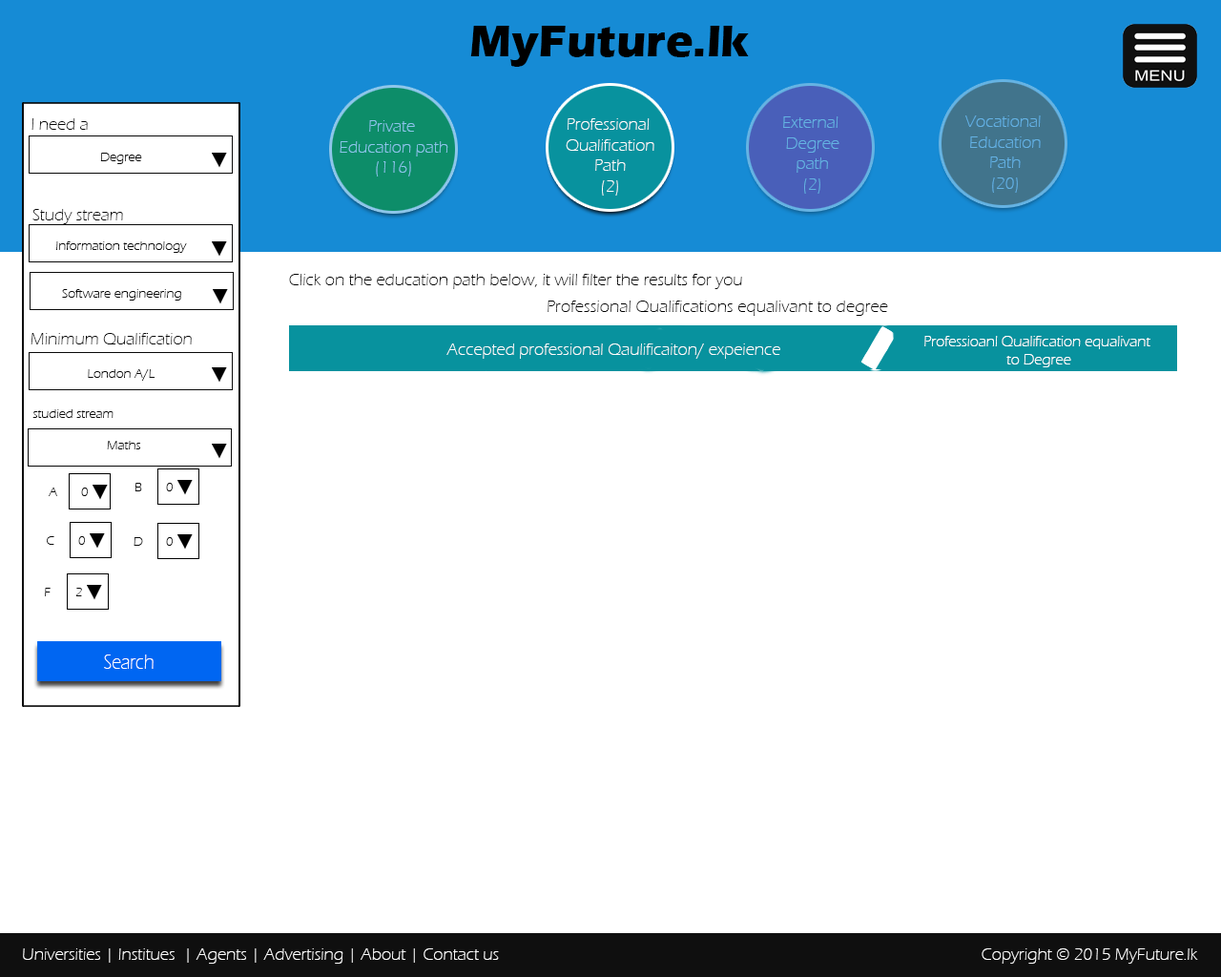
<style>
.page{position:relative;width:1221px;height:977px;background:#ffffff}
.page>*{position:absolute;margin:0}
.t1{font:45.8px "ErasITC-Bold";color:#000000}
.t2{font:17.2px "ErasITC-Light";color:#090909}
.t3{font:17.2px "ErasITC-Light";color:#8dc6ea}
.t4{font:17.2px "ErasITC-Light";color:#fffefe}
.t5{font:17.2px "ErasITC-Light";color:#65b2e3}
.t6{font:13.4px "ErasITC-Light";color:#090909}
.t7{font:17.2px "ErasITC-Light";color:#000000}
.t8{font:15px "ErasITC-Light";color:#fffefe}
.t9{font:21.6px "ErasITC-Light";color:#ffffff;scale:0.83 1}
.t10{font:17.2px "ErasITC-Light";color:#ffffff}
</style>
<div class="page">
<p class="t1" style="left:470px;top:26px;width:279px;height:41px">MyFuture.lk</p>
<p class="t2" style="left:31px;top:118px;width:57px;height:12px">I need a</p>
<p class="t3" style="left:340px;top:120px;width:108px;height:56px;text-align:center">Private <br>Education path<br>(116)</p>
<p class="t4" style="left:566px;top:118px;width:88px;height:78px;text-align:center">Professional <br>Qualification<br>Path<br>(2)</p>
<p class="t5" style="left:783px;top:116px;width:56px;height:78px;text-align:center">External <br>Degree<br>path<br>(2)</p>
<p class="t5" style="left:965px;top:115px;width:76px;height:78px;text-align:center">Vocational <br>Education<br>Path<br>(20)</p>
<p class="t6" style="left:100px;top:153px;width:42px;height:11px">Degree</p>
<p class="t2" style="left:32px;top:209px;width:91px;height:15px">Study stream</p>
<p class="t6" style="left:56px;top:241px;width:131px;height:12px">Information technology</p>
<p class="t7" style="left:289px;top:274px;width:453px;height:15px">Click on the education path below, it will filter the results for you</p>
<p class="t6" style="left:62px;top:289px;width:119px;height:11px">Software engineering</p>
<p class="t7" style="left:547px;top:300px;width:341px;height:16px">Professional Qualifications equalivant to degree</p>
<p class="t2" style="left:31px;top:333px;width:161px;height:11px">Minimum Qualification</p>
<p class="t8" style="left:924px;top:336px;width:226px;height:31px;text-align:center">Professioanl Qualification equalivant<br> to Degree</p>
<p class="t4" style="left:446px;top:343px;width:334px;height:16px">Accepted professional Qaulificaiton/ expeience</p>
<p class="t6" style="left:88px;top:369px;width:67px;height:12px">London A/L</p>
<p class="t6" style="left:32px;top:409px;width:82px;height:9px">studied stream</p>
<p class="t6" style="left:107px;top:441px;width:33px;height:8px">Maths</p>
<p class="t6" style="left:134px;top:483px;width:8px;height:8px">B</p>
<p class="t6" style="left:166px;top:483px;width:7px;height:8px">0</p>
<p class="t6" style="left:49px;top:487px;width:8px;height:9px">A</p>
<p class="t6" style="left:81px;top:487px;width:7px;height:9px">0</p>
<p class="t6" style="left:47px;top:536px;width:7px;height:9px">C</p>
<p class="t6" style="left:78px;top:536px;width:7px;height:9px">0</p>
<p class="t6" style="left:134px;top:537px;width:9px;height:9px">D</p>
<p class="t6" style="left:166px;top:537px;width:7px;height:9px">0</p>
<p class="t6" style="left:45px;top:588px;width:6px;height:8px">F</p>
<p class="t6" style="left:75px;top:588px;width:7px;height:8px">2</p>
<p class="t9" style="left:104px;top:654px;width:50px;height:15px">Search</p>
<p class="t10" style="left:23px;top:948px;width:476px;height:15px">Universities | Institues  | Agents | Advertising | About | Contact us</p>
<p class="t10" style="left:981px;top:948px;width:217px;height:15px">Copyright © 2015 MyFuture.lk</p>
</div>
